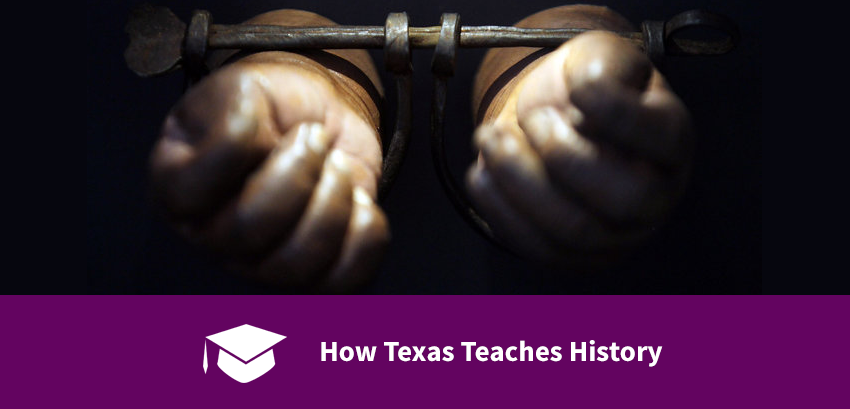
<style>
.page{position:relative;width:850px;height:409px;background:#630460}
.page>*{position:absolute;margin:0}
.t1{font:29px "SourceSansPro-Bold";color:#ffffff}
</style>
<div class="page">
<p class="t1" style="left:321px;top:340px;width:342px;height:27px">How Texas Teaches History</p>
</div>
